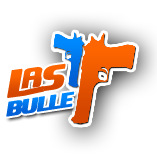
<style>
.page{position:relative;width:157px;height:157px;background:#ffffff}
.page>*{position:absolute;margin:0}
.t1{font:51px "Motorwerk";color:#e95600;text-transform:uppercase;font-weight:bold}
.t2{font:57.2px "Motorwerk";letter-spacing:-0.04em;color:#e35201;text-transform:uppercase;font-weight:bold}
.t3{font:41.3px "Motorwerk";letter-spacing:-0.04em;color:#ef5b00;text-transform:uppercase;font-weight:bold}
.t4{font:30.3px "Motorwerk";letter-spacing:-0.08em;color:#0071e6;text-transform:uppercase;font-weight:bold}
</style>
<div class="page">
<p class="t1" style="left:41px;top:63px;width:25px;height:29px;rotate:-8deg">S</p>
<p class="t2" style="left:7px;top:68px;width:23px;height:30px;rotate:-8deg">L</p>
<p class="t3" style="left:19px;top:67px;width:24px;height:23px;rotate:-8deg">a</p>
<p class="t4" style="left:6px;top:91px;width:69px;height:26px;rotate:-9deg">bullE</p>
</div>
